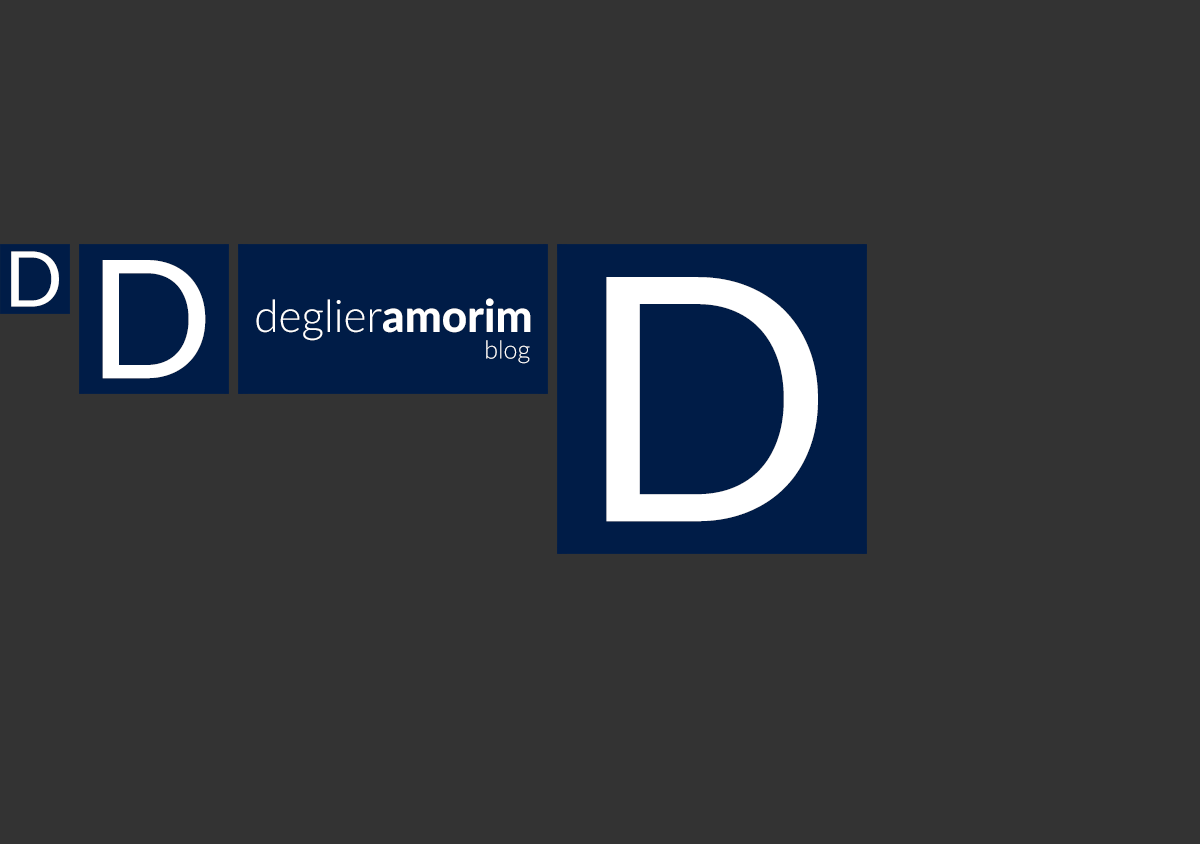
<style>
.page{position:relative;width:1200px;height:844px;background:#333333}
.page>*{position:absolute;margin:0}
.t1{font:76.8px "Lato-Regular";color:#ffffff}
.t2{font:164.6px "Lato-Regular";color:#ffffff}
.t3{font:340.2px "Lato-Regular";color:#ffffff}
.t4{font:44.8px "Lato-Light";color:#ffffff}
.t5{font:44.8px "Lato-Heavy";color:#ffffff}
.t6{font:25px "Lato-Light";color:#ffffff}
</style>
<div class="page">
<p class="t1" style="left:11px;top:251px;width:48px;height:56px">D</p>
<p class="t2" style="left:102px;top:260px;width:104px;height:119px">D</p>
<p class="t3" style="left:606px;top:277px;width:212px;height:245px">D</p>
<p class="t4" style="left:256px;top:298px;width:275px;height:43px">deglier<span class="t5">amorim</span></p>
<p class="t6" style="left:486px;top:340px;width:44px;height:24px">blog</p>
</div>
